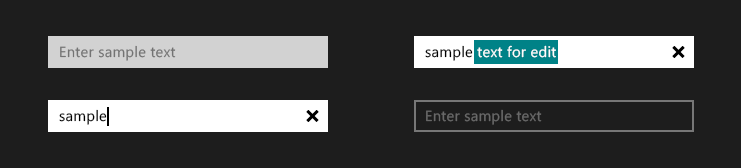
<style>
.page{position:relative;width:741px;height:168px;background:#1d1d1d}
.page>*{position:absolute;margin:0}
.t1{font:14.7px "SegoeUI";letter-spacing:0.02em;color:#737373}
.t2{font:14.7px "SegoeUI";letter-spacing:0.02em;color:#000000}
.t3{font:14.7px "SegoeUI";letter-spacing:0.02em;color:#686868}
</style>
<div class="page">
<p class="t1" style="left:60px;top:45px;width:116px;height:16px">Enter sample text</p>
<p class="t2" style="left:59px;top:109px;width:48px;height:16px">sample</p>
<p class="t3" style="left:426px;top:109px;width:116px;height:16px">Enter sample text</p>
</div>
